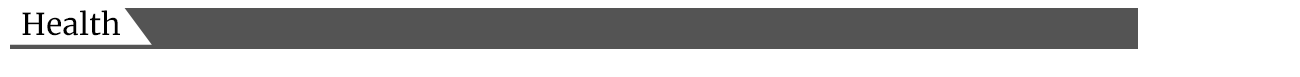
<style>
.page{position:relative;width:1300px;height:77px;background:#ffffff}
.page>*{position:absolute;margin:0}
.t1{font:30px "Merriweather-Regular";color:#000000}
</style>
<div class="page">
<p class="t1" style="left:22px;top:10px;width:98px;height:26px">Health</p>
</div>
